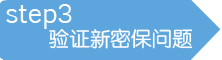
<style>
.page{position:relative;width:222px;height:60px;background:#5ca5dd}
.page>*{position:absolute;margin:0}
.t1{font:26.8px "EuphemiaCAS";color:#fdfdfd}
.t2{font:26.8px "Kalinga";color:#fdfdfd}
.t3{font:20.6px "FZY3JW--GB1-0";color:#fdfdfd}
</style>
<div class="page">
<p class="t1" style="left:6px;top:4px;width:66px;height:25px">step<span class="t2">3</span></p>
<p class="t3" style="left:49px;top:28px;width:144px;height:21px">验证新密保问题</p>
</div>
